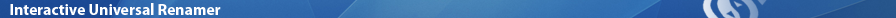
<style>
.page{position:relative;width:896px;height:18px}
.page>*{position:absolute;margin:0}
.t1{font:15.7px "MyriadPro-Bold";color:#ffffff}
</style>
<div class="page">
<p class="t1" style="left:10px;top:3px;width:211px;height:12px">Interactive Universal Renamer</p>
</div>
